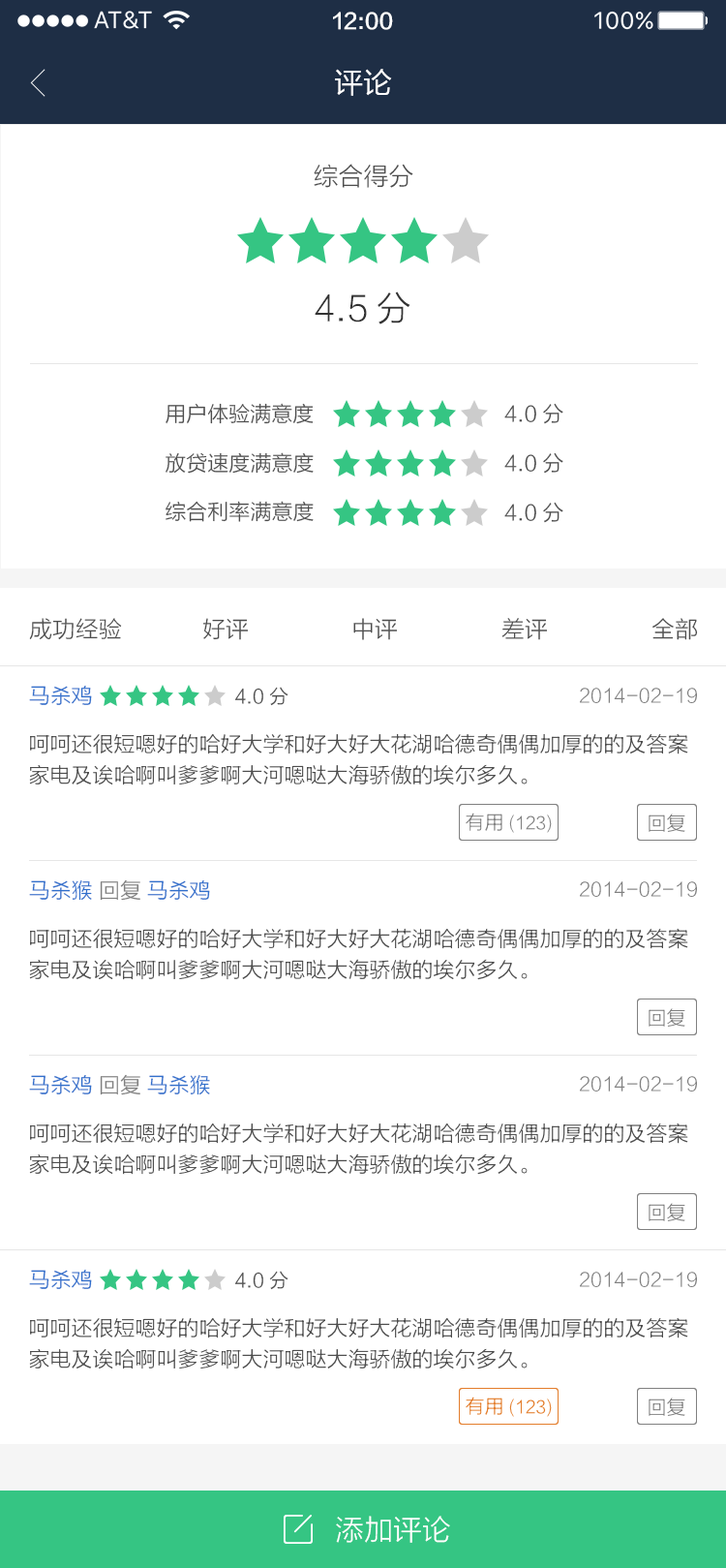
<style>
.page{position:relative;width:726px;height:1568px;background:#ffffff}
.page>*{position:absolute;margin:0}
.t1{font:21.3px "FZLTZHK--GBK1-0";color:#ffffff}
.t2{font:29.1px "FZLTHJW--GB1-0";color:#ffffff}
.t3{font:25.2px "FZLTXHK";color:#4d4d4d}
.t4{font:34.9px "FZLTXHK";color:#333333}
.t5{font:21.3px "FZLTXHK";color:#4d4d4d}
.t6{font:21.4px "FZLTXHK";color:#4d4d4d}
.t7{font:23.2px "FZLTXHK";color:#4d4d4d}
.t8{font:21.3px "FZLTXHK";color:#3170cc}
.t9{font:19.4px "FZLTXHK";color:#4d4d4d}
.t10{font:19.4px "FZLTXHK";color:#808080}
.t11{font:21.3px/31px "FZLTXHK";color:#4d4d4d}
.t12{font:17.4px "FZLTXHK";color:#808080}
.t13{font:21.3px "FZLTXHK";color:#808080}
.t14{font:17.4px "FZLTXHK";color:#e27d2b}
.t15{font:19.4px "FZLTXHK";color:#e27d2b}
.t16{font:29.1px "FZLTXHK";color:#ffffff}
</style>
<div class="page">
<p class="t1" style="left:333px;top:12px;width:60px;height:18px">12:00</p>
<p class="t2" style="left:335px;top:69px;width:57px;height:27px">评论</p>
<p class="t3" style="left:314px;top:164px;width:100px;height:24px">综合得分</p>
<p class="t4" style="left:315px;top:292px;width:96px;height:32px">4.5分</p>
<p class="t5" style="left:166px;top:403px;width:148px;height:21px">用户体验满意度</p>
<p class="t5" style="left:505px;top:403px;width:59px;height:21px">4.0分</p>
<p class="t6" style="left:166px;top:452px;width:148px;height:22px">放贷速度满意度</p>
<p class="t5" style="left:505px;top:452px;width:59px;height:22px">4.0分</p>
<p class="t6" style="left:166px;top:501px;width:148px;height:21px">综合利率满意度</p>
<p class="t5" style="left:505px;top:502px;width:59px;height:21px">4.0分</p>
<p class="t7" style="left:29px;top:618px;width:93px;height:22px">成功经验</p>
<p class="t7" style="left:203px;top:618px;width:45px;height:22px">好评</p>
<p class="t7" style="left:354px;top:618px;width:43px;height:22px">中评</p>
<p class="t7" style="left:502px;top:618px;width:45px;height:22px">差评</p>
<p class="t7" style="left:653px;top:618px;width:45px;height:22px">全部</p>
<p class="t8" style="left:29px;top:686px;width:63px;height:19px">马杀鸡</p>
<p class="t9" style="left:234px;top:687px;width:55px;height:19px">4.0分</p>
<p class="t10" style="left:580px;top:688px;width:117px;height:15px">2014-02-19</p>
<p class="t11" style="left:29px;top:733px;width:660px;height:52px">呵呵还很短嗯好的哈好大学和好大好大花湖哈德奇偶偶加厚的的及答案<br>家电及诶哈啊叫爹爹啊大河嗯哒大海骄傲的埃尔多久。</p>
<p class="t12" style="left:466px;top:813px;width:86px;height:20px"><span class="t10">有用</span>(123)</p>
<p class="t10" style="left:649px;top:814px;width:37px;height:18px">回复</p>
<p class="t8" style="left:29px;top:879px;width:63px;height:22px">马杀猴</p>
<p class="t13" style="left:100px;top:879px;width:40px;height:22px">回复</p>
<p class="t8" style="left:147px;top:880px;width:63px;height:20px">马杀鸡</p>
<p class="t10" style="left:580px;top:881px;width:117px;height:16px">2014-02-19</p>
<p class="t11" style="left:29px;top:928px;width:660px;height:52px">呵呵还很短嗯好的哈好大学和好大好大花湖哈德奇偶偶加厚的的及答案<br>家电及诶哈啊叫爹爹啊大河嗯哒大海骄傲的埃尔多久。</p>
<p class="t10" style="left:649px;top:1008px;width:37px;height:19px">回复</p>
<p class="t8" style="left:29px;top:1075px;width:63px;height:19px">马杀鸡</p>
<p class="t13" style="left:100px;top:1074px;width:40px;height:21px">回复</p>
<p class="t8" style="left:147px;top:1074px;width:63px;height:21px">马杀猴</p>
<p class="t10" style="left:580px;top:1076px;width:117px;height:15px">2014-02-19</p>
<p class="t11" style="left:29px;top:1122px;width:660px;height:53px">呵呵还很短嗯好的哈好大学和好大好大花湖哈德奇偶偶加厚的的及答案<br>家电及诶哈啊叫爹爹啊大河嗯哒大海骄傲的埃尔多久。</p>
<p class="t10" style="left:649px;top:1203px;width:37px;height:18px">回复</p>
<p class="t8" style="left:29px;top:1270px;width:63px;height:19px">马杀鸡</p>
<p class="t9" style="left:234px;top:1271px;width:55px;height:19px">4.0分</p>
<p class="t10" style="left:580px;top:1272px;width:117px;height:15px">2014-02-19</p>
<p class="t11" style="left:29px;top:1317px;width:660px;height:52px">呵呵还很短嗯好的哈好大学和好大好大花湖哈德奇偶偶加厚的的及答案<br>家电及诶哈啊叫爹爹啊大河嗯哒大海骄傲的埃尔多久。</p>
<p class="t14" style="left:466px;top:1397px;width:86px;height:20px"><span class="t15">有用</span>(123)</p>
<p class="t10" style="left:649px;top:1398px;width:37px;height:18px">回复</p>
<p class="t16" style="left:336px;top:1516px;width:114px;height:27px">添加评论</p>
</div>
